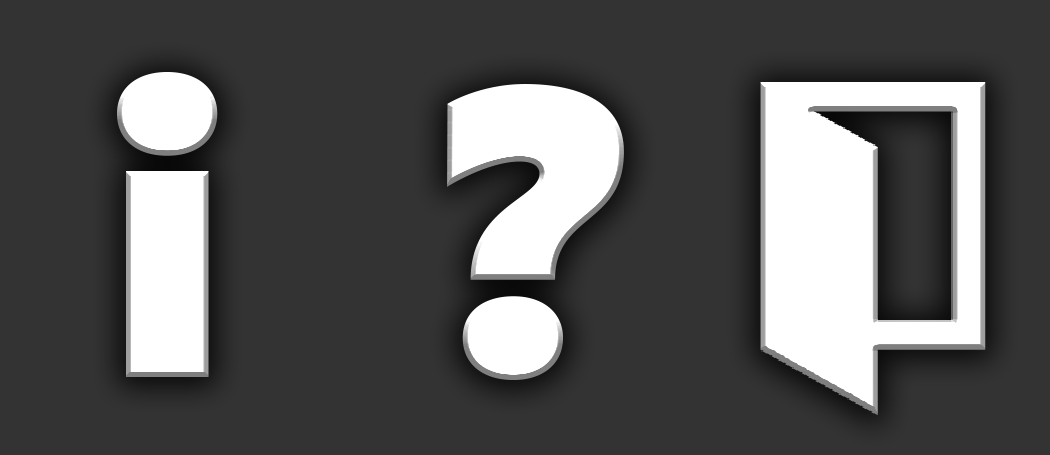
<style>
.page{position:relative;width:1050px;height:455px;background:#333333}
.page>*{position:absolute;margin:0}
.t1{font:412.5px "Radlush-ExtraBold";letter-spacing:-0.01em;color:#ffffff}
</style>
<div class="page">
<p class="t1" style="left:117px;top:72px;width:101px;height:305px">i</p>
<p class="t1" style="left:447px;top:84px;width:177px;height:296px">?</p>
</div>
